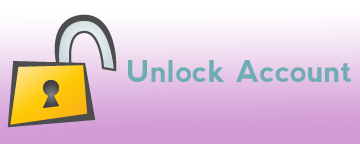
<style>
.page{position:relative;width:360px;height:144px}
.page>*{position:absolute;margin:0}
.t1{font:30px "nevis-Bold";color:#6eadb4}
</style>
<div class="page">
<p class="t1" style="left:128px;top:60px;width:223px;height:23px">Unlock Account</p>
</div>
